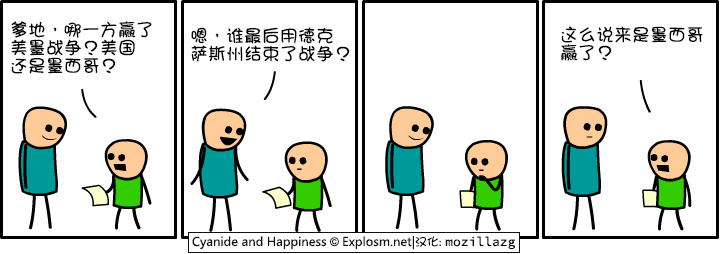
<style>
.page{position:relative;width:720px;height:254px;background:#ffffff}
.page>*{position:absolute;margin:0}
.t1{font:18px/18px "DFGirl";color:#000000}
</style>
<div class="page">
<p class="t1" style="left:11px;top:21px;width:141px;height:53px">爹地，哪一方赢了<br>美墨战争？美国<br>还是墨西哥？</p>
<p class="t1" style="left:191px;top:27px;width:159px;height:35px">嗯，谁最后用德克<br>萨斯州结束了战争？</p>
<p class="t1" style="left:561px;top:26px;width:142px;height:35px">这么说来是墨西哥<br>赢了？</p>
</div>
